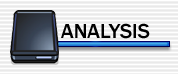
<style>
.page{position:relative;width:178px;height:74px}
.page>*{position:absolute;margin:0}
.t1{font:21px "FranklinGothic-Medium";color:#000000}
</style>
<div class="page">
<p class="t1" style="left:61px;top:23px;width:89px;height:16px">ANALYSIS</p>
</div>
